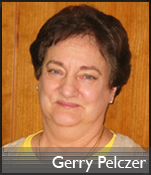
<style>
.page{position:relative;width:151px;height:175px}
.page>*{position:absolute;margin:0}
.t1{font:16.7px "GillSansMT";color:#fffefe}
</style>
<div class="page">
<p class="t1" style="left:52px;top:156px;width:95px;height:16px">Gerry Pelczer</p>
</div>
